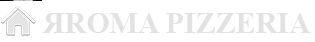
<style>
.page{position:relative;width:315px;height:42px;background:#ffffff}
.page>*{position:absolute;margin:0}
.t1{font:30px "TimesNewRomanPS-BoldMT";color:#e2e2e2}
</style>
<div class="page">
<p class="t1" style="left:42px;top:13px;width:269px;height:20px">ЯROMA PIZZERIA</p>
</div>
